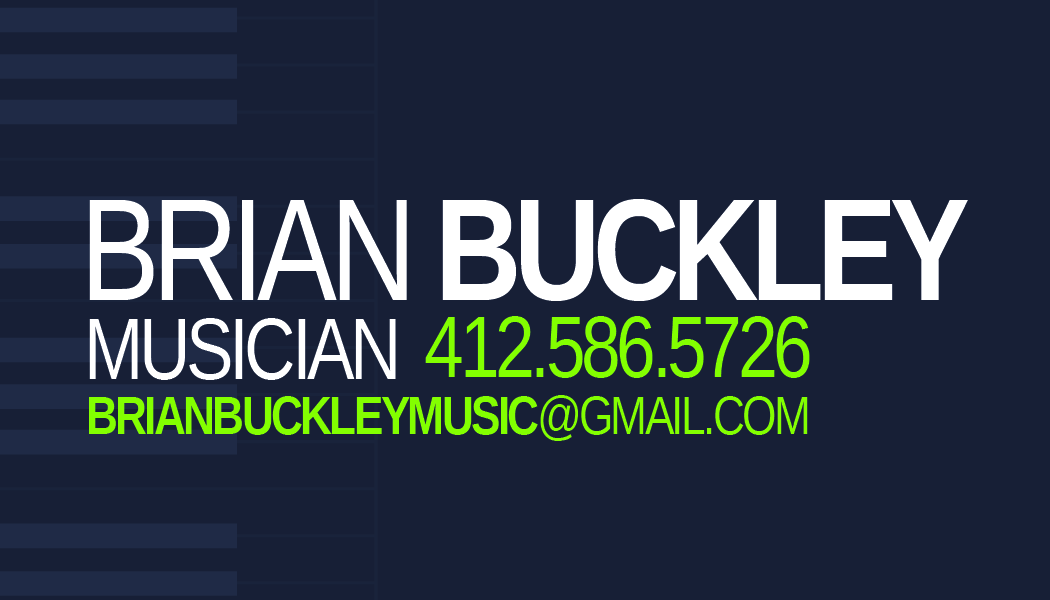
<style>
.page{position:relative;width:1050px;height:600px;background:#171f36}
.page>*{position:absolute;margin:0}
.t1{font:146px "LiberationSansNarrow-Bold";letter-spacing:-0.05em;color:#ffffff;text-transform:uppercase}
.t2{font:146px "LiberationSansNarrow";letter-spacing:-0.05em;color:#ffffff;text-transform:uppercase}
.t3{font:87px "LiberationSansNarrow";letter-spacing:-0.05em;color:#ffffff;text-transform:uppercase}
.t4{font:87px "LiberationSansNarrow";letter-spacing:-0.05em;color:#83ff00;text-transform:uppercase}
.t5{font:54px "LiberationSansNarrow-Bold";letter-spacing:-0.05em;color:#83ff00;text-transform:uppercase}
.t6{font:54px "LiberationSansNarrow";letter-spacing:-0.05em;color:#83ff00;text-transform:uppercase}
</style>
<div class="page">
<p class="t1" style="left:89px;top:199px;width:879px;height:102px"><span class="t2">Brian </span>Buckley</p>
<p class="t3" style="left:89px;top:318px;width:307px;height:62px">Musician</p>
<p class="t4" style="left:425px;top:316px;width:385px;height:62px">412.586.5726</p>
<p class="t5" style="left:89px;top:395px;width:719px;height:46px">brianbuckleymusic<span class="t6">@GMAIL.com</span></p>
</div>
